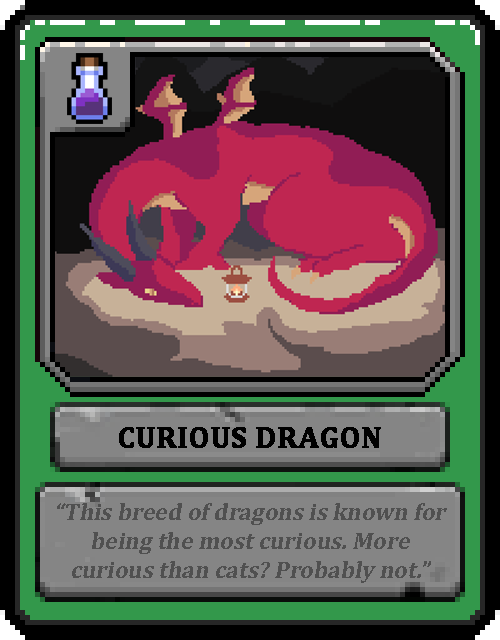
<style>
.page{position:relative;width:500px;height:640px}
.page>*{position:absolute;margin:0}
.t1{font:30px "Cambria-Bold";color:#000000;text-transform:uppercase;font-weight:bold}
.t2{font:24px "Cambria-Bold";color:#505050;font-style:italic}
</style>
<div class="page">
<p class="t1" style="left:119px;top:427px;width:262px;height:21px">Curious Dragon</p>
<p class="t2" style="left:57px;top:503px;width:390px;height:80px;text-align:center">“This breed of dragons is known for being the most curious. More curious than cats? Probably not.”</p>
</div>
